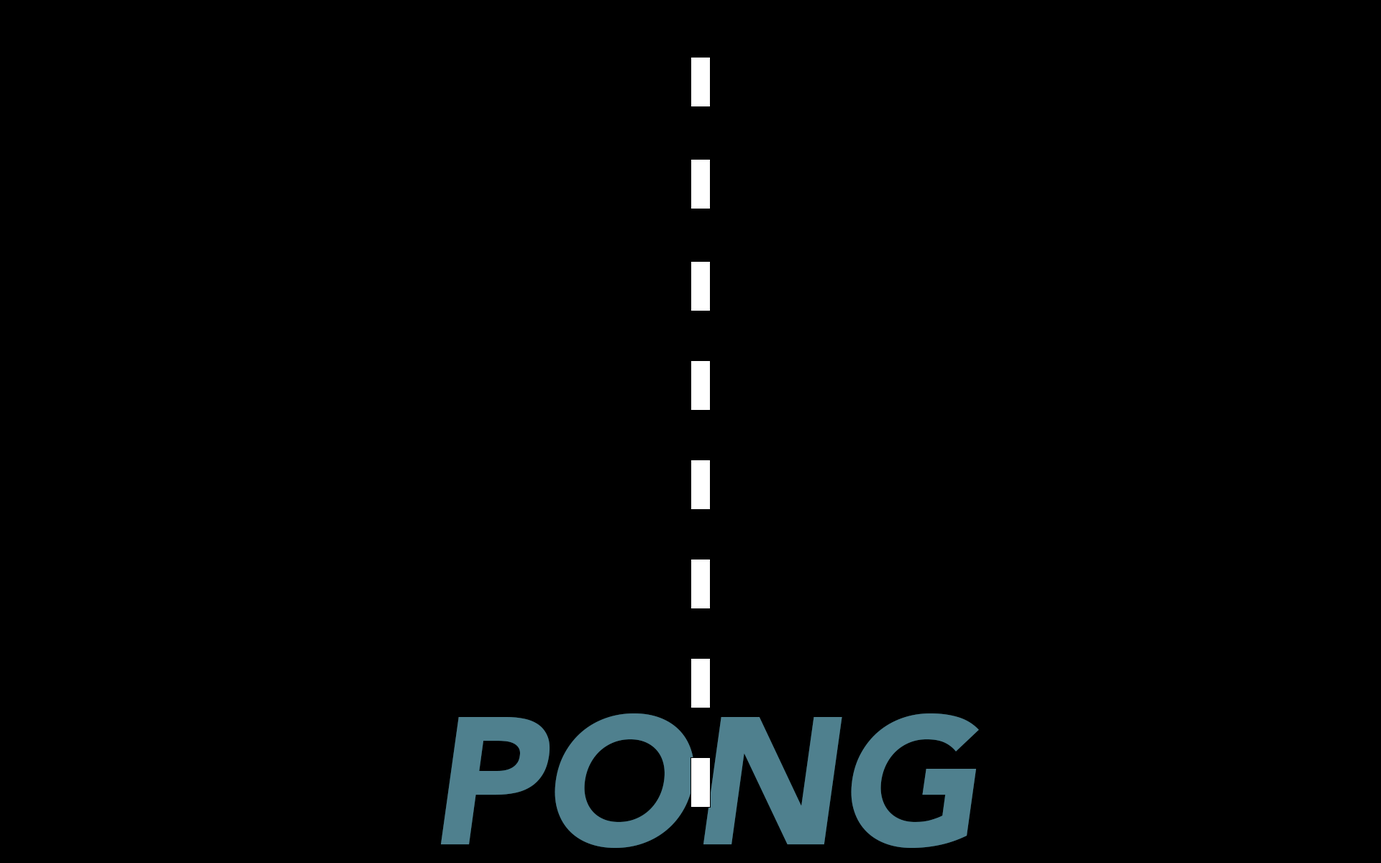
<style>
.page{position:relative;width:1381px;height:863px;background:#000000}
.page>*{position:absolute;margin:0}
.t1{font:179.9px "Avenir-BlackOblique";color:#4f808e}
</style>
<div class="page">
<p class="t1" style="left:441px;top:714px;width:538px;height:134px">PONG</p>
</div>
